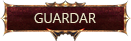
<style>
.page{position:relative;width:131px;height:41px;background:#ffffff}
.page>*{position:absolute;margin:0}
.t1{font:14px "LeelawadeeUI-Semilight";color:#ebe4c7}
</style>
<div class="page">
<p class="t1" style="left:34px;top:13px;width:62px;height:10px">GUARDAR</p>
</div>
